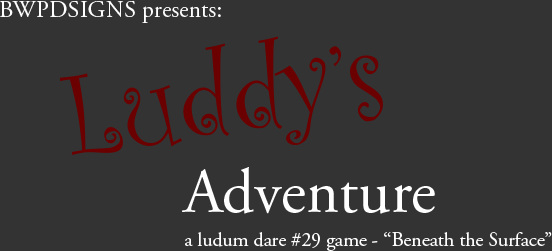
<style>
.page{position:relative;width:552px;height:251px;background:#333333}
.page>*{position:absolute;margin:0}
.t1{font:24px "AGaramondPro-Regular";color:#ffffff}
.t2{font:122px "CurlzMT";color:#6a0000}
.t3{font:63px "AGaramondPro-Regular";color:#ffffff}
.t4{font:20px "AGaramondPro-Regular";color:#ffffff}
</style>
<div class="page">
<p class="t1" style="left:0px;top:0px;width:221px;height:23px">BWPDSIGNS presents:</p>
<p class="t2" style="left:59px;top:36px;width:324px;height:119px;rotate:-7deg">Luddy’s</p>
<p class="t3" style="left:182px;top:167px;width:253px;height:47px">Adventure</p>
<p class="t4" style="left:185px;top:232px;width:367px;height:19px">a ludum dare #29 game - “Beneath the Surface”</p>
</div>
